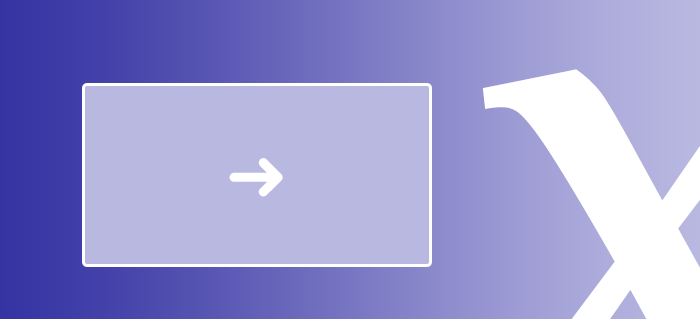
<style>
.page{position:relative;width:700px;height:319px;background:#b9b8e1}
.page>*{position:absolute;margin:0}
.t1{font:100px "Menlo-Regular";letter-spacing:0.02em;color:#ffffff}
</style>
<div class="page">
<p class="t1" style="left:229px;top:158px;width:54px;height:39px">➜</p>
</div>
